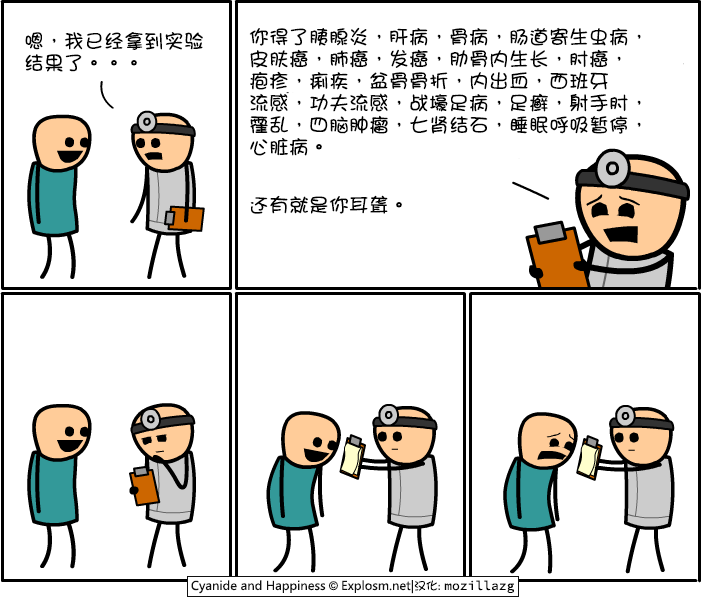
<style>
.page{position:relative;width:722px;height:598px;background:#ffffff}
.page>*{position:absolute;margin:0}
.t1{font:20px/22px "DFGirl";color:#000000}
.t2{font:20px "DFGirl";color:#000000}
</style>
<div class="page">
<p class="t1" style="left:249px;top:27px;width:392px;height:129px">你得了胰腺炎，肝病，骨病，肠道寄生虫病，<br>皮肤癌，肺癌，发癌，肋骨内生长，肘癌，<br>疱疹，痢疾，盆骨骨折，内出血，西班牙<br>流感，功夫流感，战壕足病，足癣，射手肘，<br>霍乱，四脑肿瘤，七肾结石，睡眠呼吸暂停，<br>心脏病。</p>
<p class="t1" style="left:25px;top:32px;width:178px;height:40px">嗯，我已经拿到实验<br>结果了。。。</p>
<p class="t2" style="left:250px;top:195px;width:152px;height:19px">还有就是你耳聋。</p>
</div>
